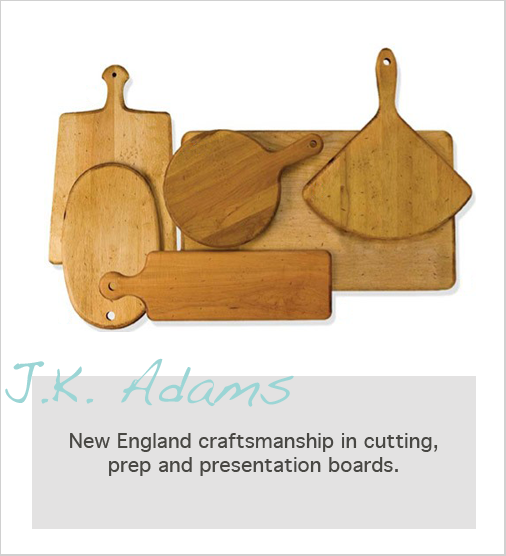
<style>
.page{position:relative;width:506px;height:556px;background:#ffffff}
.page>*{position:absolute;margin:0}
.t1{font:56px "Handwriting-Dakota";color:#9bd5d5}
.t2{font:20px "Geneva";color:#484743}
</style>
<div class="page">
<p class="t1" style="left:5px;top:358px;width:289px;height:49px">J.K. Adams</p>
<p class="t2" style="left:70px;top:433px;width:368px;height:43px;text-align:center">New England craftsmanship in cutting, prep and presentation boards.</p>
</div>
